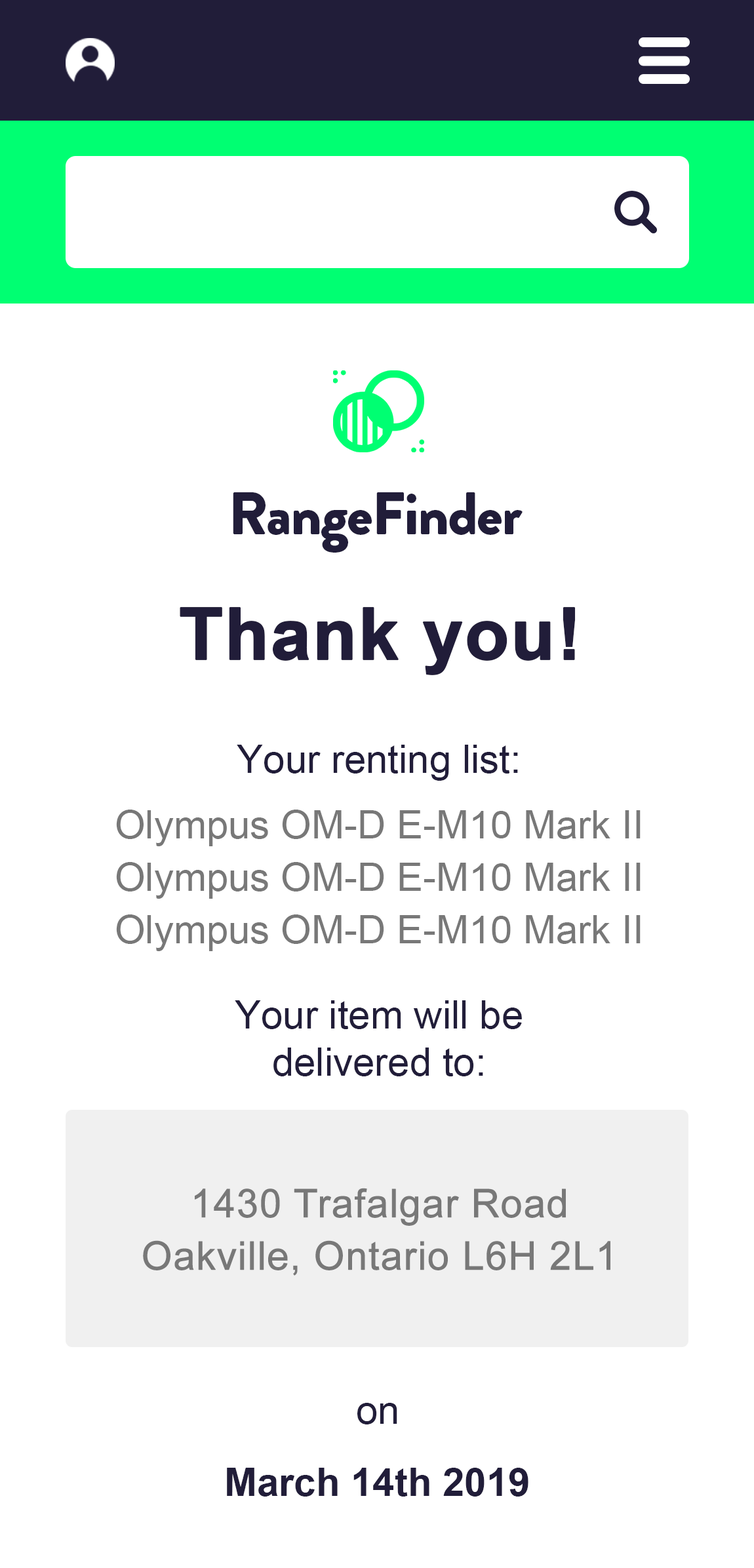
<style>
.page{position:relative;width:754px;height:1568px;background:#ffffff}
.page>*{position:absolute;margin:0}
.t1{font:59.8px "BrandonGrotesque-Black";letter-spacing:-0.025em;color:#211d39}
.t2{font:72.1px "Arial-BoldMT";color:#211d39;font-weight:bold}
.t3{font:39.3px "ArialMT";color:#211d39}
.t4{font:39.3px "ArialMT";color:#787878}
.t5{font:39.3px/52.4px "ArialMT";color:#787878;font-weight:bold}
.t6{font:39.3px "Arial-BoldMT";color:#211d39}
</style>
<div class="page">
<p class="t1" style="left:233px;top:492px;width:289px;height:61px">RangeFinder</p>
<p class="t2" style="left:180px;top:607px;width:396px;height:68px">Thank you!</p>
<p class="t3" style="left:237px;top:745px;width:281px;height:36px">Your renting list:</p>
<p class="t4" style="left:116px;top:810px;width:524px;height:36px">Olympus OM-D E-M10 Mark II</p>
<p class="t4" style="left:116px;top:862px;width:524px;height:37px">Olympus OM-D E-M10 Mark II</p>
<p class="t4" style="left:116px;top:914px;width:524px;height:37px">Olympus OM-D E-M10 Mark II</p>
<p class="t3" style="left:235px;top:1000px;width:287px;height:76px;text-align:center">Your item will be<br>delivered to:</p>
<p class="t5" style="left:143px;top:1188px;width:467px;height:88px;text-align:center">1430 Trafalgar Road<br>Oakville, Ontario L6H 2L1</p>
<p class="t3" style="left:357px;top:1403px;width:40px;height:21px">on</p>
<p class="t6" style="left:227px;top:1468px;width:301px;height:29px">March 14th 2019</p>
</div>
